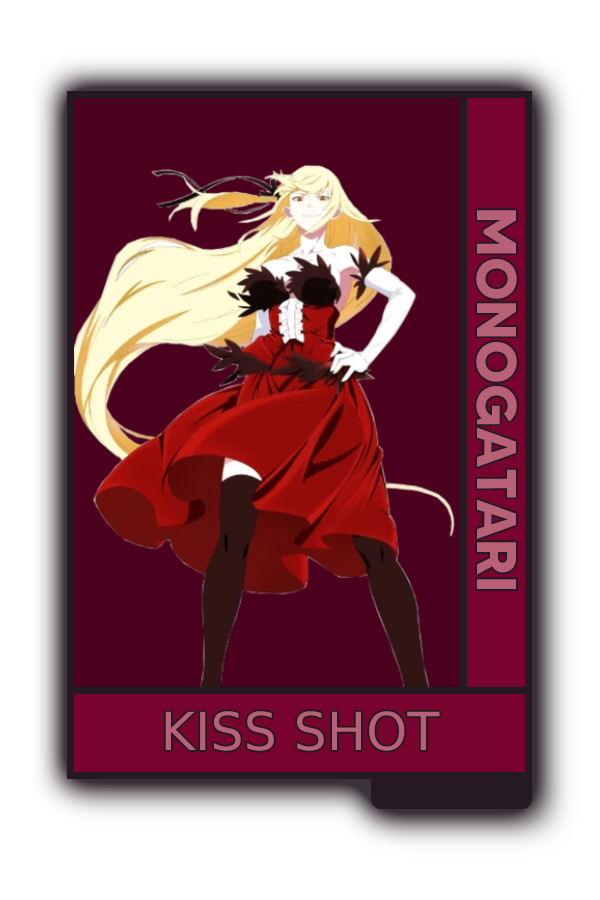
<style>
.page{position:relative;width:600px;height:900px;background:#4b011d}
.page>*{position:absolute;margin:0}
.t1{font:55.8px "MADETOMMY-Bold";color:#b86076}
.t2{font:52.4px "CoolveticaRg-Regular";color:#b86076}
</style>
<div class="page">
<p class="t1" style="left:476px;top:210px;width:41px;height:379px;rotate:90deg">MONOGATARI</p>
<p class="t2" style="left:165px;top:711px;width:275px;height:40px">KISS SHOT</p>
</div>
